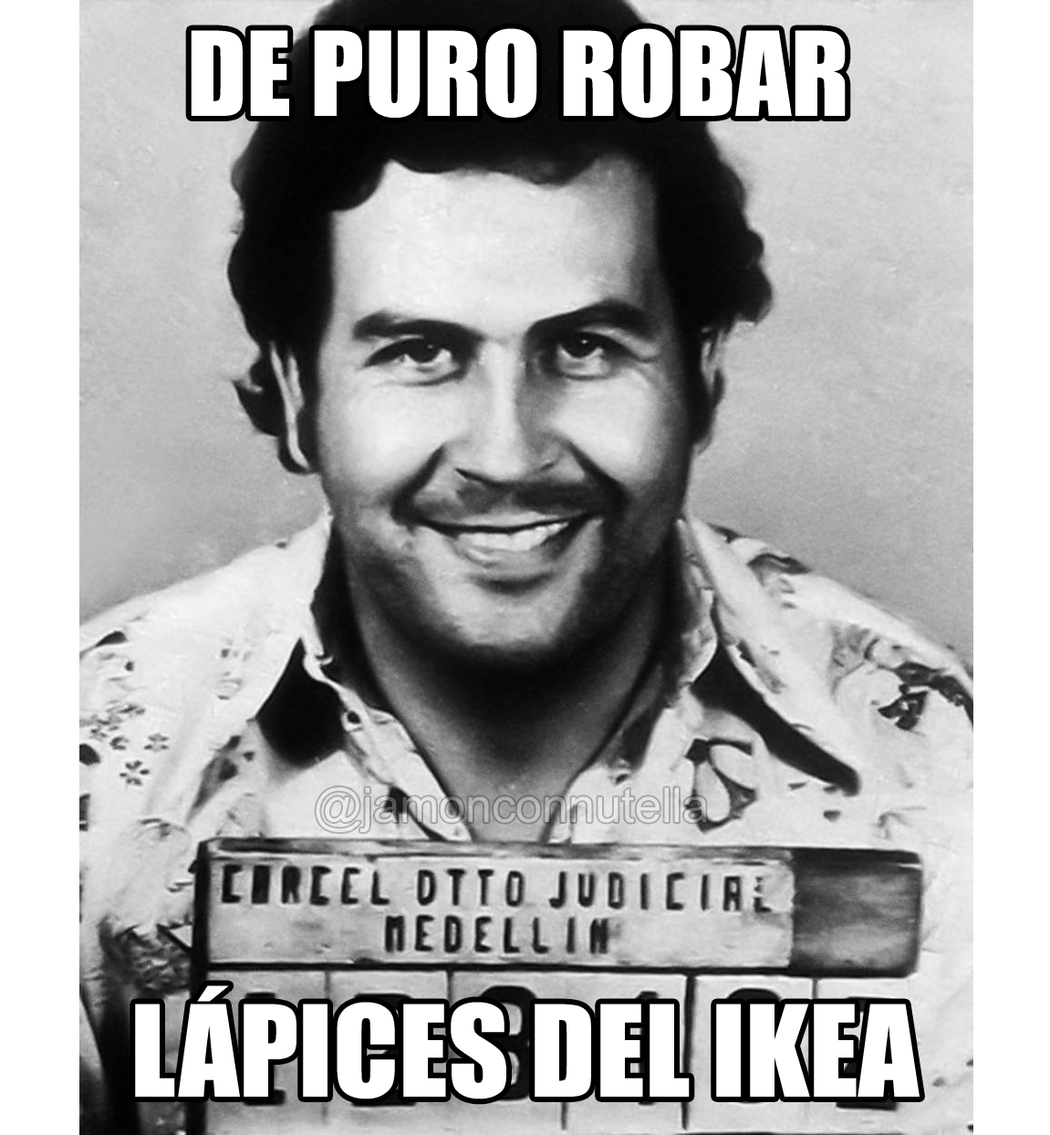
<style>
.page{position:relative;width:1050px;height:1135px;background:#ffffff}
.page>*{position:absolute;margin:0}
.t1{font:107.8px "Impact";color:#ffffff}
.t2{font:117px "Impact";color:#ffffff}
</style>
<div class="page">
<p class="t1" style="left:191px;top:28px;width:655px;height:90px">DE PURO ROBAR</p>
<p class="t2" style="left:135px;top:986px;width:785px;height:114px">LÁPICES DEL IKEA</p>
</div>
